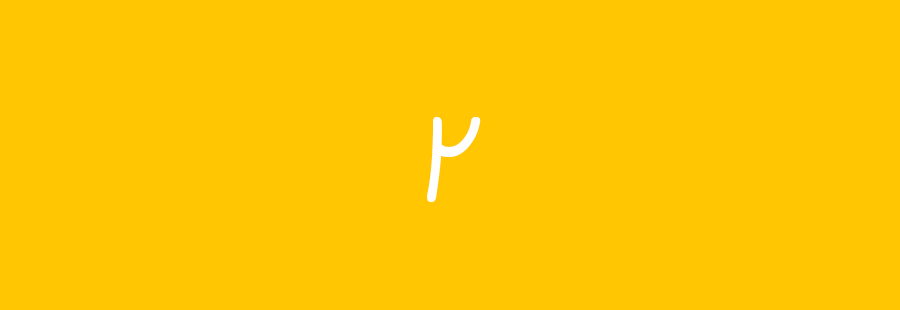
<style>
.page{position:relative;width:900px;height:310px;background:#ffc601}
.page>*{position:absolute;margin:0}
.t1{font:179.2px "IRKamran";color:#ffffff}
</style>
<div class="page">
<p class="t1" style="left:427px;top:117px;width:54px;height:85px">2</p>
</div>
